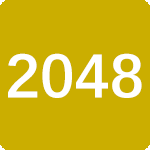
<style>
.page{position:relative;width:150px;height:150px;background:#cbae00}
.page>*{position:absolute;margin:0}
.t1{font:62.5px "DengXian-Bold";color:#ffffff}
</style>
<div class="page">
<p class="t1" style="left:8px;top:53px;width:134px;height:45px">2048</p>
</div>
